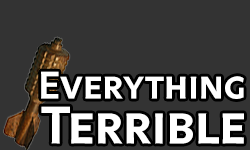
<style>
.page{position:relative;width:250px;height:150px;background:#333333}
.page>*{position:absolute;margin:0}
.t1{font:40px/45px "LegatoSC-SemiBold";color:#ffffff}
.t2{font:55px/45px "LegatoSC-SemiBold";color:#ffffff}
</style>
<div class="page">
<p class="t1" style="left:41px;top:71px;width:203px;height:73px">Everything<br><span class="t2">Terrible</span></p>
</div>
